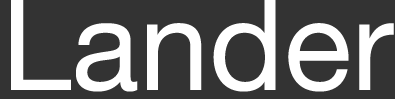
<style>
.page{position:relative;width:395px;height:99px;background:#333333}
.page>*{position:absolute;margin:0}
.t1{font:126px "HelveticaNeueLTPro-Roman";color:#ffffff}
</style>
<div class="page">
<p class="t1" style="left:11px;top:0px;width:383px;height:92px">Lander</p>
</div>
